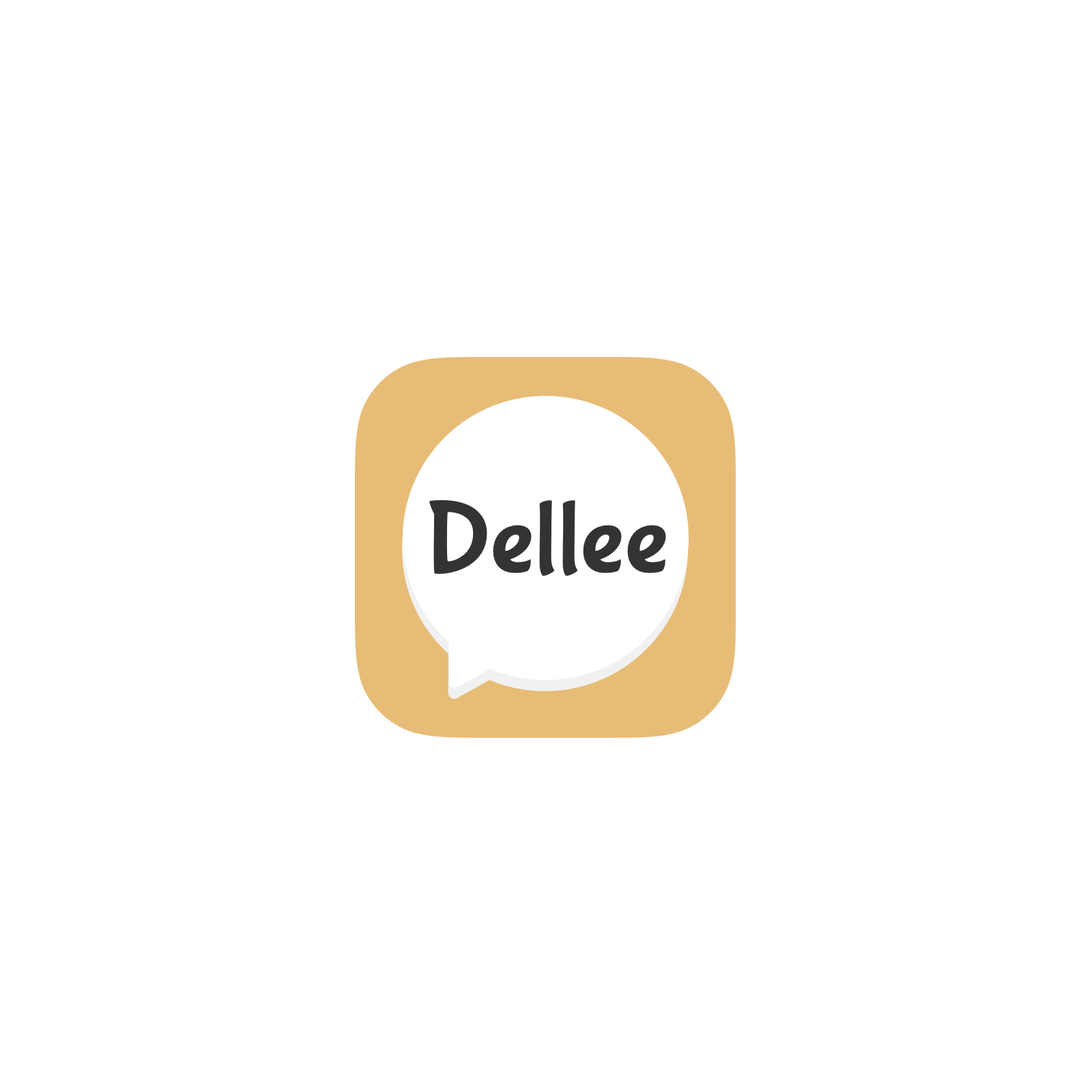
<style>
.page{position:relative;width:1092px;height:1092px;background:#ffffff}
.page>*{position:absolute;margin:0}
.t1{font:103.7px "BubblegumSans-Regular";color:#333333}
</style>
<div class="page">
<p class="t1" style="left:429px;top:500px;width:237px;height:76px">Dellee</p>
</div>
